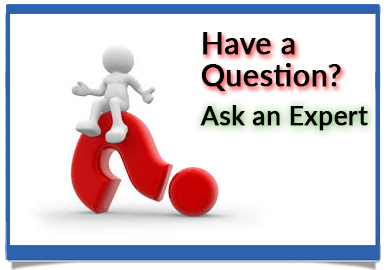
<style>
.page{position:relative;width:390px;height:270px;background:#ffffff}
.page>*{position:absolute;margin:0}
.t1{font:30px/32px "Lato-Medium";color:#000000;font-weight:bold}
.t2{font:26px "Lato-Medium";color:#000000;font-weight:bold}
</style>
<div class="page">
<p class="t1" style="left:201px;top:32px;width:140px;height:59px">Have a Question?</p>
<p class="t2" style="left:200px;top:105px;width:168px;height:26px">Ask an Expert</p>
</div>
